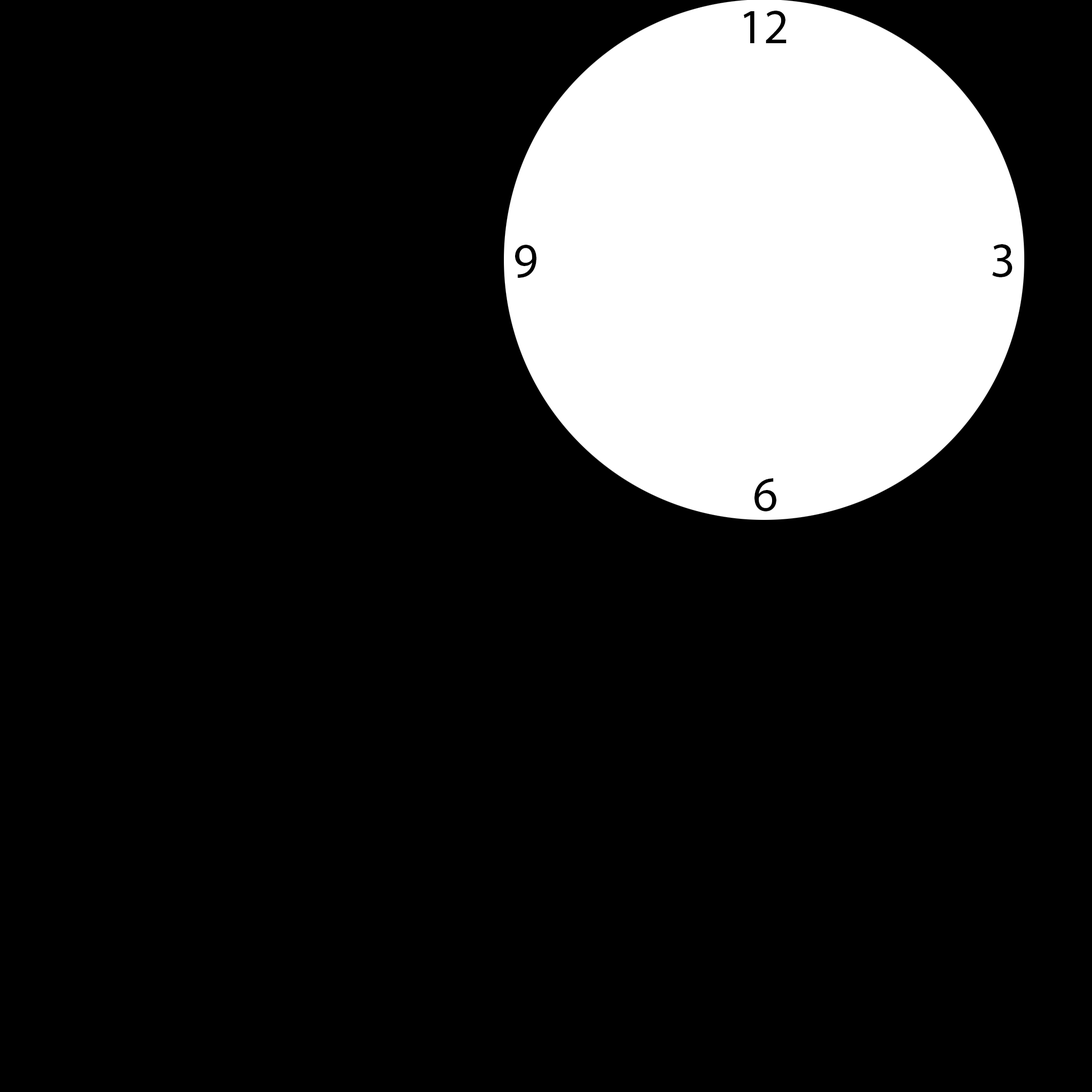
<style>
.page{position:relative;width:1092px;height:1092px;background:#000000}
.page>*{position:absolute;margin:0}
.t1{font:49.1px "MyriadPro-Regular";color:#000000}
</style>
<div class="page">
<p class="t1" style="left:743px;top:11px;width:43px;height:32px">12</p>
<p class="t1" style="left:515px;top:245px;width:21px;height:33px">9</p>
<p class="t1" style="left:992px;top:244px;width:21px;height:33px">3</p>
<p class="t1" style="left:754px;top:478px;width:22px;height:33px">6</p>
</div>
